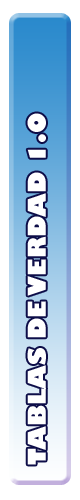
<style>
.page{position:relative;width:80px;height:500px;background:#ffffff}
.page>*{position:absolute;margin:0}
.t1{font:24px "GillSans-UltraBold";color:#ffffff}
</style>
<div class="page">
<p class="t1" style="left:27px;top:113px;width:19px;height:352px;rotate:-90deg">TABLAS DE VERDAD 1.0</p>
</div>
